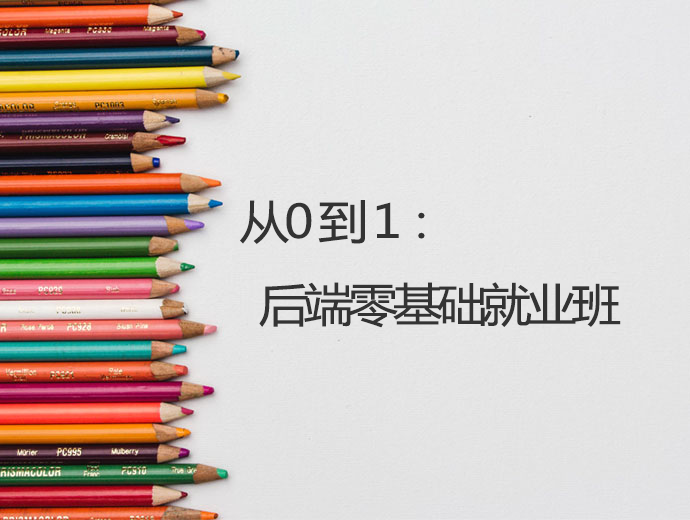
<style>
.page{position:relative;width:690px;height:520px}
.page>*{position:absolute;margin:0}
.t1{font:78.2px/41.4px "MicrosoftYaHei";letter-spacing:-0.1em;color:#333333;font-variant:small-caps;scale:1.09 1}
</style>
<div class="page">
<p class="t1" style="left:240px;top:200px;width:381px;height:128px;text-align:center">从0 到 1：                    <br>           <br>后端零基础就业班</p>
</div>
